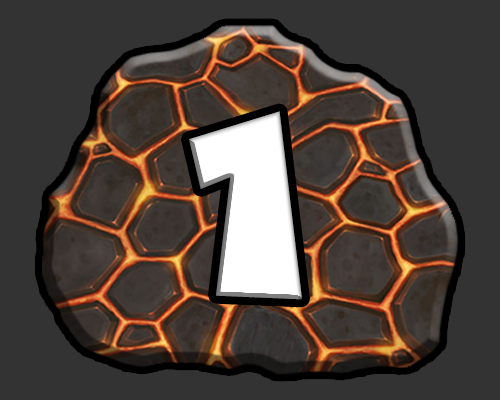
<style>
.page{position:relative;width:500px;height:400px;background:#333333}
.page>*{position:absolute;margin:0}
.t1{font:257.3px "Funhouse";color:#ffffff}
</style>
<div class="page">
<p class="t1" style="left:189px;top:111px;width:113px;height:189px">1</p>
</div>
